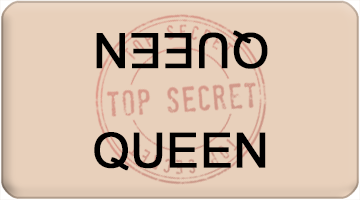
<style>
.page{position:relative;width:360px;height:200px;background:#e8d0bb}
.page>*{position:absolute;margin:0}
.t1{font:48px "ArialMT";color:#000000;font-weight:bold}
</style>
<div class="page">
<p class="t1" style="left:96px;top:30px;width:172px;height:39px;rotate:180deg">QUEEN</p>
<p class="t1" style="left:94px;top:132px;width:172px;height:39px">QUEEN</p>
</div>
